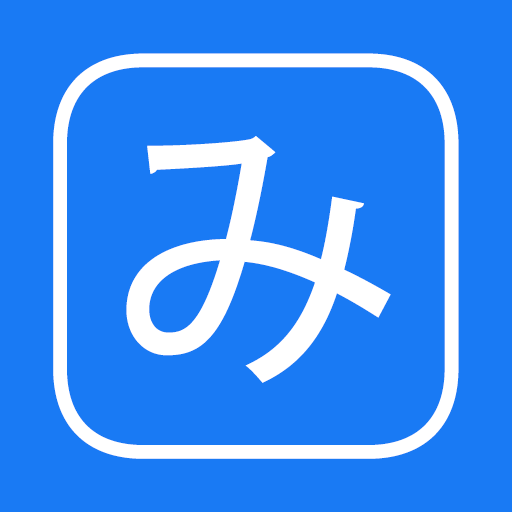
<style>
.page{position:relative;width:512px;height:512px;background:#197af4}
.page>*{position:absolute;margin:0}
.t1{font:450px "KozGoPr6N-Regular";color:#ffffff}
</style>
<div class="page">
<p class="t1" style="left:53px;top:53px;width:406px;height:406px">み</p>
</div>
